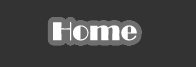
<style>
.page{position:relative;width:196px;height:67px;background:#333333}
.page>*{position:absolute;margin:0}
.t1{font:26.7px "Broadway";color:#ffffff;scale:1.03 1}
</style>
<div class="page">
<p class="t1" style="left:53px;top:22px;width:84px;height:19px">Home</p>
</div>
